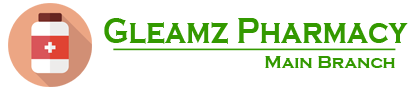
<style>
.page{position:relative;width:418px;height:90px;background:#ffffff}
.page>*{position:absolute;margin:0}
.t1{font:37.4px "CopperplateGothic-Bold";color:#339900;scale:0.8 1}
.t2{font:18px "CopperplateGothic-Bold";color:#339900}
</style>
<div class="page">
<p class="t1" style="left:104px;top:18px;width:304px;height:26px">Gleamz Pharmacy</p>
<p class="t2" style="left:265px;top:56px;width:130px;height:12px">Main Branch</p>
</div>
